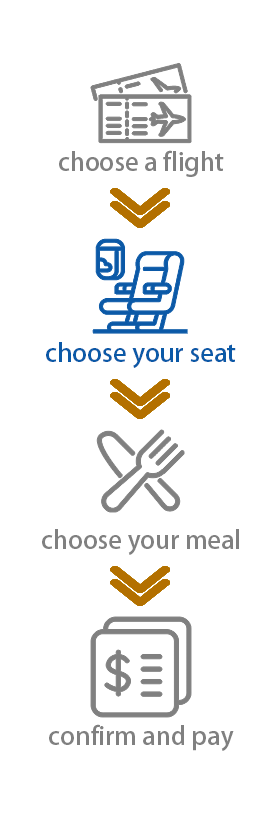
<style>
.page{position:relative;width:280px;height:840px;background:#ffffff}
.page>*{position:absolute;margin:0}
.t1{font:25px "AdobeHeitiStd-Regular";color:#0b59a7}
.t2{font:25px "AdobeHeitiStd-Regular";color:#808080}
</style>
<div class="page">
<p class="t1" style="left:46px;top:342px;width:190px;height:26px">choose your seat</p>
<p class="t2" style="left:42px;top:529px;width:197px;height:26px">choose your meal</p>
<p class="t2" style="left:49px;top:724px;width:185px;height:27px">confirm and pay</p>
</div>
